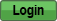
<style>
.page{position:relative;width:57px;height:21px;background:#6cc463}
.page>*{position:absolute;margin:0}
.t1{font:14.4px "Arial-BoldMT";letter-spacing:-0.025em;color:#000000;scale:0.85 1}
</style>
<div class="page">
<p class="t1" style="left:13px;top:5px;width:31px;height:13px">Login</p>
</div>
